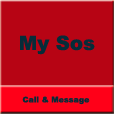
<style>
.page{position:relative;width:114px;height:114px;background:#b70414}
.page>*{position:absolute;margin:0}
.t1{font:19.6px "Arial-Black";color:#062c39}
.t2{font:7.9px "Arial-Black";color:#062c39}
</style>
<div class="page">
<p class="t1" style="left:20px;top:35px;width:75px;height:20px">My Sos</p>
<p class="t2" style="left:22px;top:96px;width:68px;height:9px">Call &amp; Message</p>
</div>
